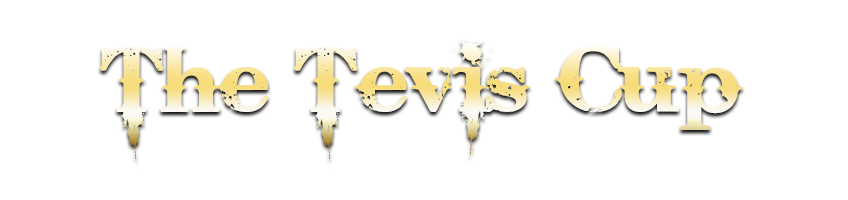
<style>
.page{position:relative;width:848px;height:200px;background:#ffffff}
.page>*{position:absolute;margin:0}
.t1{font:90px "BleedingCowboys";scale:1.11 1}
</style>
<div class="page">
<p class="t1" style="left:100px;top:39px;width:643px;height:124px">The Tevis Cup</p>
</div>
